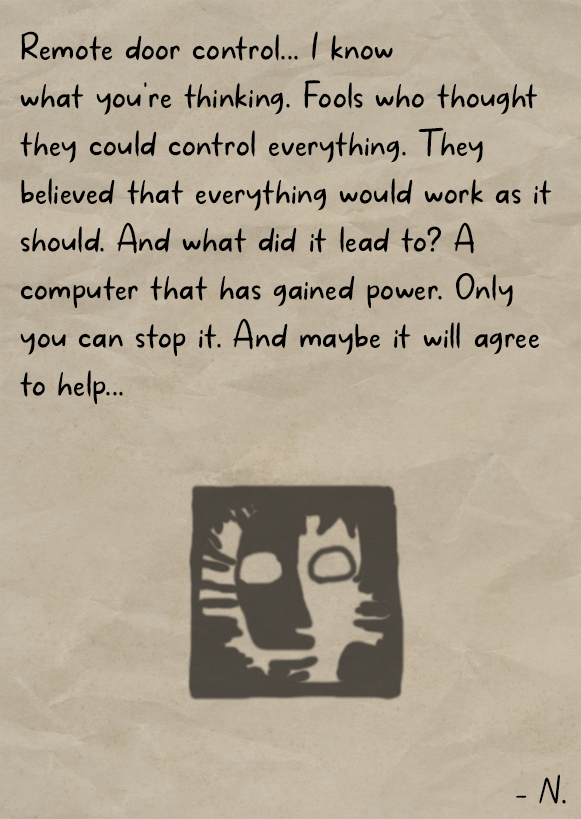
<style>
.page{position:relative;width:581px;height:819px}
.page>*{position:absolute;margin:0}
.t1{font:40px "MakanHatiCyrillicRegular";letter-spacing:0.01em;color:#000000}
</style>
<div class="page">
<p class="t1" style="left:20px;top:31px;width:532px;height:374px">Remote door control... I know<br>what you're thinking. Fools who thought they could control everything. They believed that everything would work as it should. And what did it lead to? A computer that has gained power. Only you can stop it. And maybe it will agree to help...</p>
<p class="t1" style="left:516px;top:774px;width:50px;height:30px">- N.</p>
</div>
